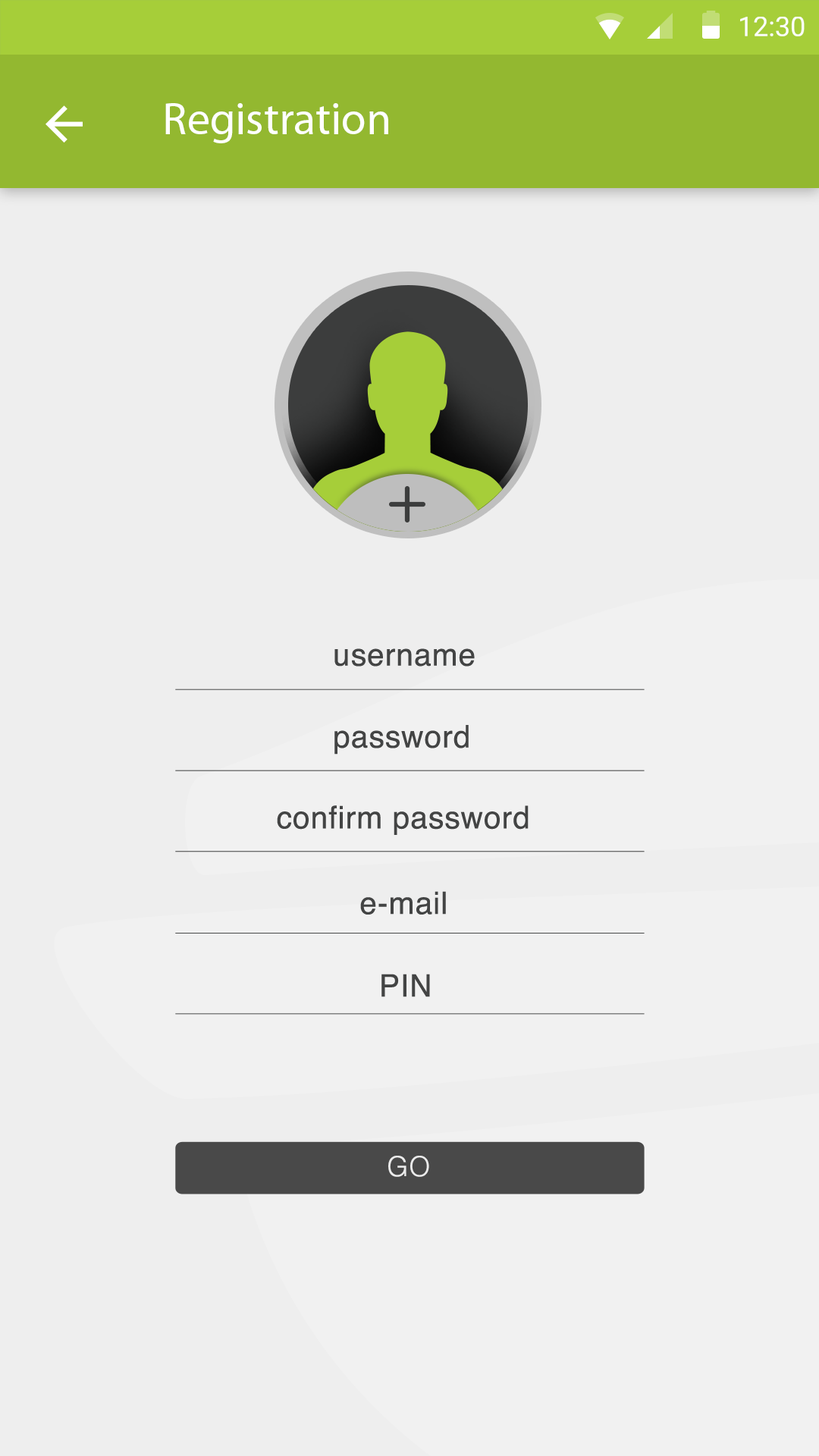
<style>
.page{position:relative;width:819px;height:1456px;background:#eeeeee}
.page>*{position:absolute;margin:0}
.t1{font:27.3px "Roboto-Regular";color:#ffffff}
.t2{font:45.5px "MyriadPro-Regular";color:#ffffff}
.t3{font:31.1px "Helvetica";letter-spacing:0.025em;color:#58585a}
.t4{font:27.6px "Helvetica-Light";letter-spacing:0.025em;color:#f0f0f0}
</style>
<div class="page">
<p class="t1" style="left:740px;top:17px;width:65px;height:19px">12:30</p>
<p class="t2" style="left:165px;top:103px;width:223px;height:40px">Registration</p>
<p class="t3" style="left:334px;top:648px;width:141px;height:19px;opacity:0.96">username</p>
<p class="t3" style="left:334px;top:725px;width:135px;height:30px;opacity:0.96">password</p>
<p class="t3" style="left:277px;top:805px;width:252px;height:30px;opacity:0.96">confirm password</p>
<p class="t3" style="left:360px;top:891px;width:86px;height:24px;opacity:0.96">e-mail</p>
<p class="t3" style="left:381px;top:974px;width:49px;height:23px;opacity:0.96">PIN</p>
<p class="t4" style="left:388px;top:1156px;width:41px;height:21px;opacity:0.96">GO</p>
</div>
